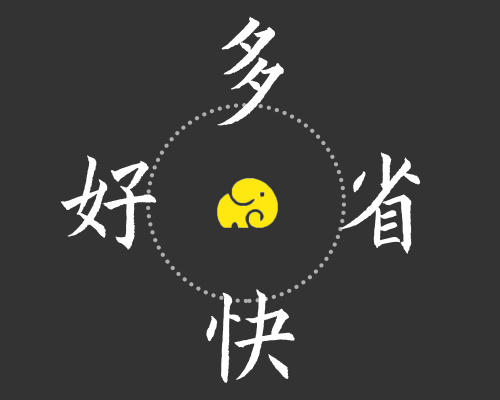
<style>
.page{position:relative;width:500px;height:400px;background:#333333}
.page>*{position:absolute;margin:0}
.t1{font:125px "FZZJ-DYKTJW";letter-spacing:0.04em;color:#ffffff}
</style>
<div class="page">
<p class="t1" style="left:217px;top:16px;width:67px;height:110px">多</p>
<p class="t1" style="left:60px;top:155px;width:97px;height:95px">好</p>
<p class="t1" style="left:340px;top:152px;width:81px;height:102px">省</p>
<p class="t1" style="left:206px;top:289px;width:89px;height:94px">快</p>
</div>
